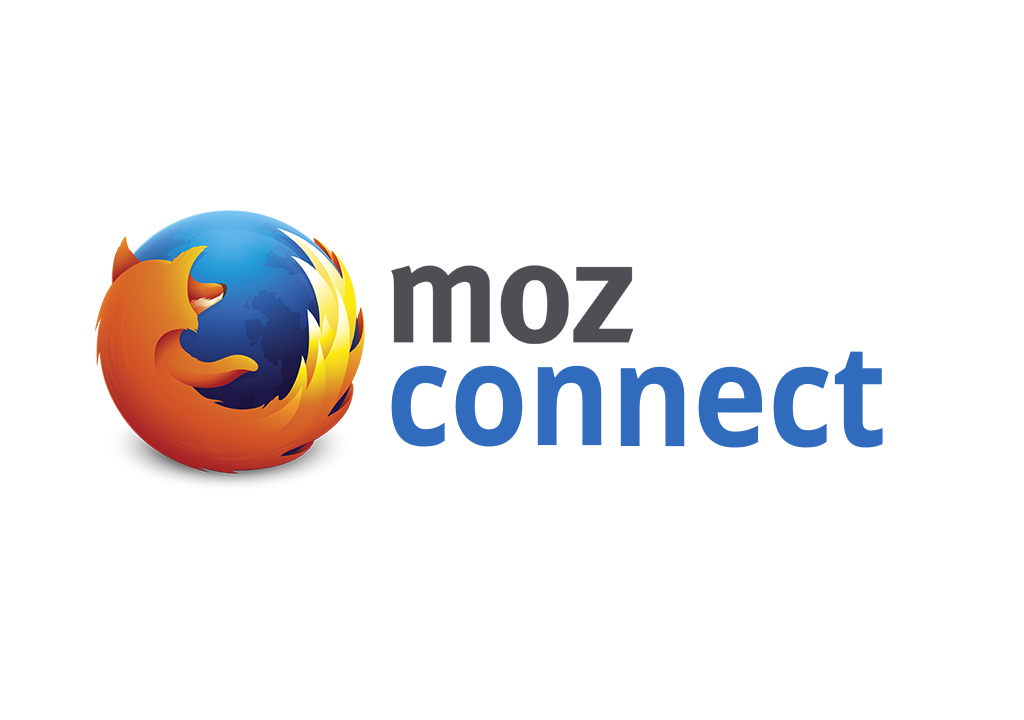
<style>
.page{position:relative;width:1024px;height:720px;background:#ffffff}
.page>*{position:absolute;margin:0}
.t1{font:142.6px "OpenSans-Bold";color:#316bbd;scale:0.88 1}
</style>
<div class="page">
<p class="t1" style="left:391px;top:351px;width:492px;height:97px">connect</p>
</div>
